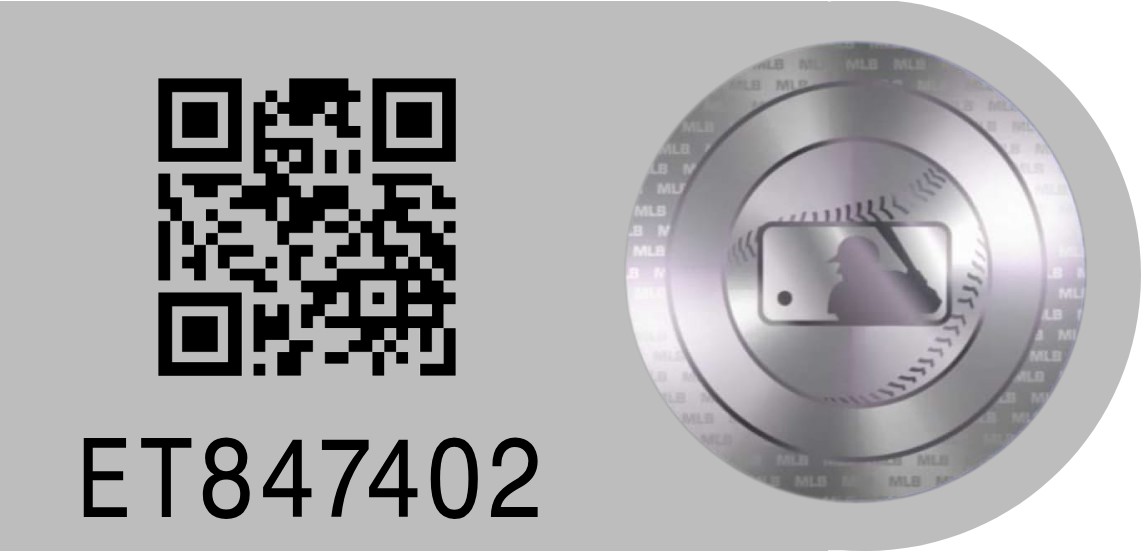
<style>
.page{position:relative;width:1141px;height:551px;background:#bdbdbd}
.page>*{position:absolute;margin:0}
.t1{font:103.2px "MonospaceTypewriter";color:#000000}
</style>
<div class="page">
<p class="t1" style="left:83px;top:437px;width:455px;height:83px">ET847402</p>
</div>
